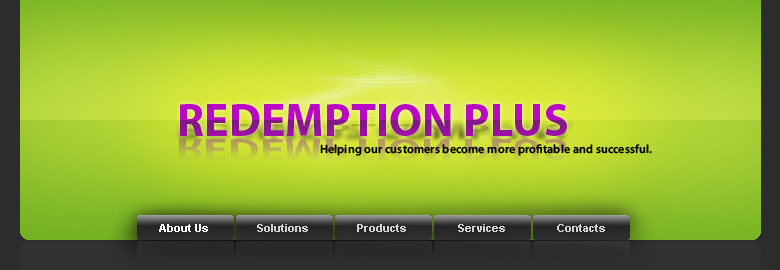
<style>
.page{position:relative;width:780px;height:270px}
.page>*{position:absolute;margin:0}
.t1{font:46px "MyriadPro-Bold";text-transform:uppercase}
.t2{font:12px "MyriadPro-Semibold";letter-spacing:0.01em;color:#000000}
.t3{font:11px "Arial-BoldMT";color:#d2d2d2}
.t4{font:11px "Arial-BoldMT";color:#ffffff}
</style>
<div class="page">
<p class="t1" style="left:180px;top:104px;width:387px;height:32px">RedempTion Plus</p>
<p class="t2" style="left:320px;top:144px;width:332px;height:12px">Helping our customers become more profitable and successful.</p>
<p class="t3" style="left:159px;top:224px;width:446px;height:8px"><span class="t4">About Us                </span>Solutions                Products                 Services                 Contacts</p>
</div>
